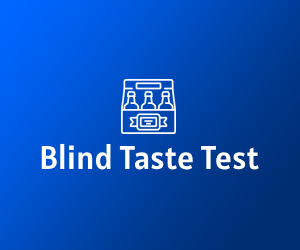
<style>
.page{position:relative;width:300px;height:250px}
.page>*{position:absolute;margin:0}
.t1{font:33px "Alatsi-Regular";color:#ffffff}
</style>
<div class="page">
<p class="t1" style="left:41px;top:143px;width:218px;height:27px">Blind Taste Test</p>
</div>
